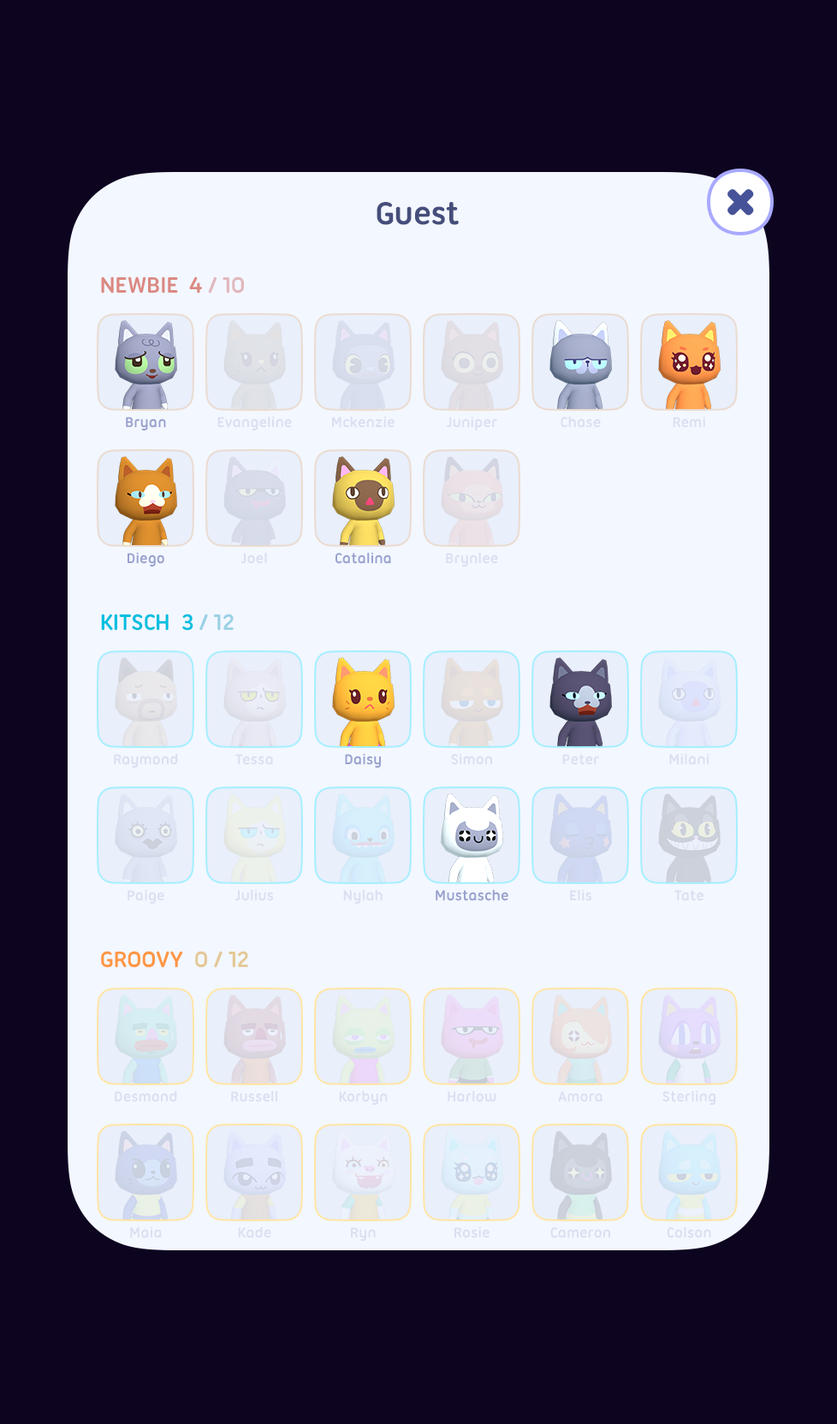
<style>
.page{position:relative;width:837px;height:1424px;background:#0d0420}
.page>*{position:absolute;margin:0}
.t1{font:34.2px "UbuntuTitling-Bold";letter-spacing:-0.025em;color:#454e7b}
.t2{font:24px "UbuntuTitling-Bold";letter-spacing:-0.025em;color:#db8982;text-transform:uppercase}
.t3{font:24px "UbuntuTitling-Bold";letter-spacing:-0.025em;color:#e1b8be;text-transform:uppercase}
.t4{font:15.4px "UbuntuTitling-Bold";letter-spacing:-0.025em;color:#98a1ce}
.t5{font:15.4px "UbuntuTitling-Bold";letter-spacing:-0.025em;color:#dadff1}
.t6{font:24px "UbuntuTitling-Bold";letter-spacing:-0.025em;color:#01bfe0;text-transform:uppercase}
.t7{font:24px "UbuntuTitling-Bold";letter-spacing:-0.025em;color:#9ad1e5;text-transform:uppercase}
.t8{font:24px "UbuntuTitling-Bold";letter-spacing:-0.025em;color:#ff9743;text-transform:uppercase}
.t9{font:24px "UbuntuTitling-Bold";letter-spacing:-0.025em;color:#e4c897;text-transform:uppercase}
</style>
<div class="page">
<p class="t1" style="left:377px;top:202px;width:82px;height:23px">Guest</p>
<p class="t2" style="left:101px;top:276px;width:143px;height:18px">Newbie  4 <span class="t3">/ 10</span></p>
<p class="t4" style="left:126px;top:417px;width:40px;height:14px">Bryan</p>
<p class="t5" style="left:217px;top:416px;width:75px;height:15px">Evangeline</p>
<p class="t5" style="left:332px;top:416px;width:63px;height:12px">Mckenzie</p>
<p class="t5" style="left:447px;top:416px;width:50px;height:15px">Juniper</p>
<p class="t5" style="left:561px;top:416px;width:40px;height:12px">Chase</p>
<p class="t5" style="left:673px;top:416px;width:32px;height:12px">Remi</p>
<p class="t4" style="left:128px;top:552px;width:36px;height:15px">Diego</p>
<p class="t5" style="left:241px;top:552px;width:26px;height:12px">Joel</p>
<p class="t4" style="left:336px;top:552px;width:55px;height:12px">Catalina</p>
<p class="t5" style="left:446px;top:552px;width:52px;height:15px">Brynlee</p>
<p class="t6" style="left:101px;top:614px;width:133px;height:17px">Kitsch  3 <span class="t7">/ 12</span></p>
<p class="t5" style="left:114px;top:753px;width:64px;height:15px">Raymond</p>
<p class="t5" style="left:235px;top:754px;width:38px;height:11px">Tessa</p>
<p class="t4" style="left:345px;top:753px;width:36px;height:15px">Daisy</p>
<p class="t5" style="left:451px;top:753px;width:41px;height:12px">Simon</p>
<p class="t5" style="left:562px;top:754px;width:37px;height:11px">Peter</p>
<p class="t5" style="left:669px;top:753px;width:40px;height:12px">Milani</p>
<p class="t5" style="left:128px;top:889px;width:36px;height:15px">Paige</p>
<p class="t5" style="left:235px;top:889px;width:38px;height:12px">Julius</p>
<p class="t5" style="left:343px;top:889px;width:40px;height:15px">Nylah</p>
<p class="t4" style="left:436px;top:889px;width:72px;height:12px">Mustasche</p>
<p class="t5" style="left:570px;top:889px;width:21px;height:12px">Elis</p>
<p class="t5" style="left:675px;top:890px;width:29px;height:11px">Tate</p>
<p class="t8" style="left:101px;top:951px;width:147px;height:17px">Groovy  <span class="t9">0 / 12</span></p>
<p class="t5" style="left:115px;top:1091px;width:62px;height:12px">Desmond</p>
<p class="t5" style="left:231px;top:1091px;width:46px;height:12px">Russell</p>
<p class="t5" style="left:339px;top:1091px;width:49px;height:14px">Korbyn</p>
<p class="t5" style="left:448px;top:1091px;width:48px;height:12px">Harlow</p>
<p class="t5" style="left:558px;top:1091px;width:45px;height:12px">Amora</p>
<p class="t5" style="left:663px;top:1091px;width:53px;height:14px">Sterling</p>
<p class="t5" style="left:130px;top:1227px;width:32px;height:12px">Maia</p>
<p class="t5" style="left:238px;top:1227px;width:33px;height:12px">Kade</p>
<p class="t5" style="left:351px;top:1227px;width:25px;height:14px">Ryn</p>
<p class="t5" style="left:455px;top:1227px;width:35px;height:12px">Rosie</p>
<p class="t5" style="left:550px;top:1227px;width:60px;height:12px">Cameron</p>
<p class="t5" style="left:668px;top:1227px;width:43px;height:12px">Colson</p>
</div>
